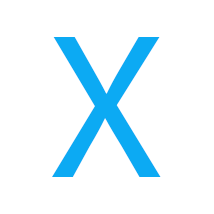
<style>
.page{position:relative;width:214px;height:214px;background:#ffffff}
.page>*{position:absolute;margin:0}
.t1{font:208.3px "MyriadPro-Regular";color:#0caaf3}
</style>
<div class="page">
<p class="t1" style="left:52px;top:37px;width:109px;height:140px">X</p>
</div>
